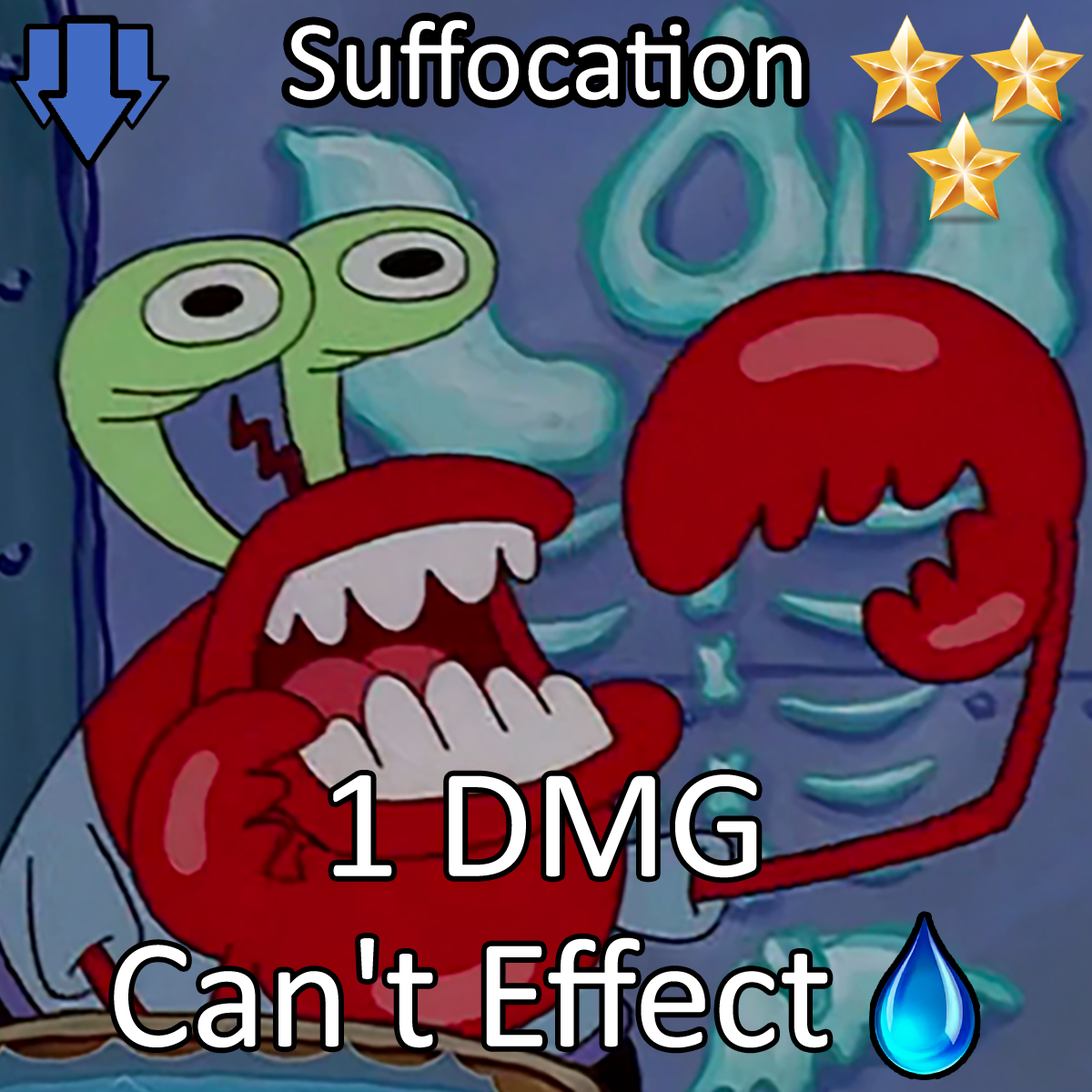
<style>
.page{position:relative;width:1092px;height:1092px}
.page>*{position:absolute;margin:0}
.t1{font:196.6px "Calibri";color:#ffffff}
.t2{font:271.2px/170.2px "Calibri";color:#ffffff}
.t3{font:271.2px/170.2px "stoogedings-Regular";color:#ffffff}
</style>
<div class="page">
<p class="t1" style="left:289px;top:20px;width:513px;height:80px">Suffocation</p>
<p class="t2" style="left:114px;top:774px;width:862px;height:301px;text-align:center">1 DMG<br>Can't Effect <span class="t3">[water]</span></p>
</div>
